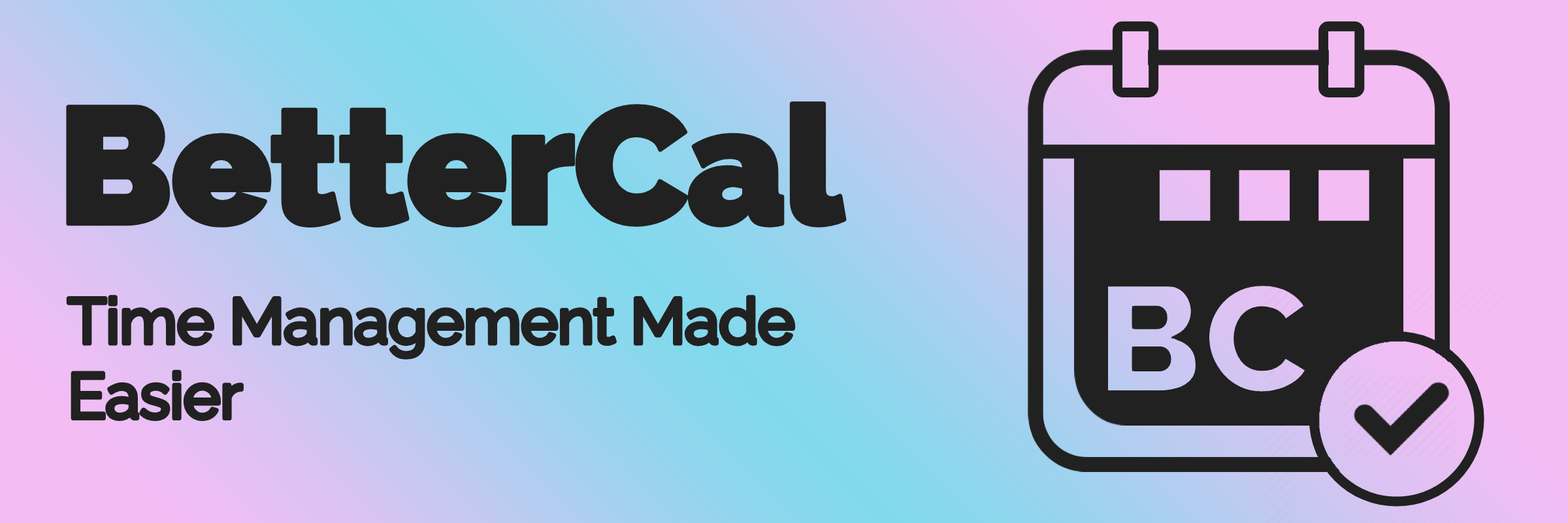
<style>
.page{position:relative;width:1568px;height:523px}
.page>*{position:absolute;margin:0}
.t1{font:163.2px "Raleway-Black";color:#212121}
.t2{font:62.4px "Raleway-Regular";color:#212121}
</style>
<div class="page">
<p class="t1" style="left:65px;top:100px;width:782px;height:129px">BetterCal</p>
<p class="t2" style="left:65px;top:294px;width:731px;height:128px">Time Management Made Easier</p>
</div>
